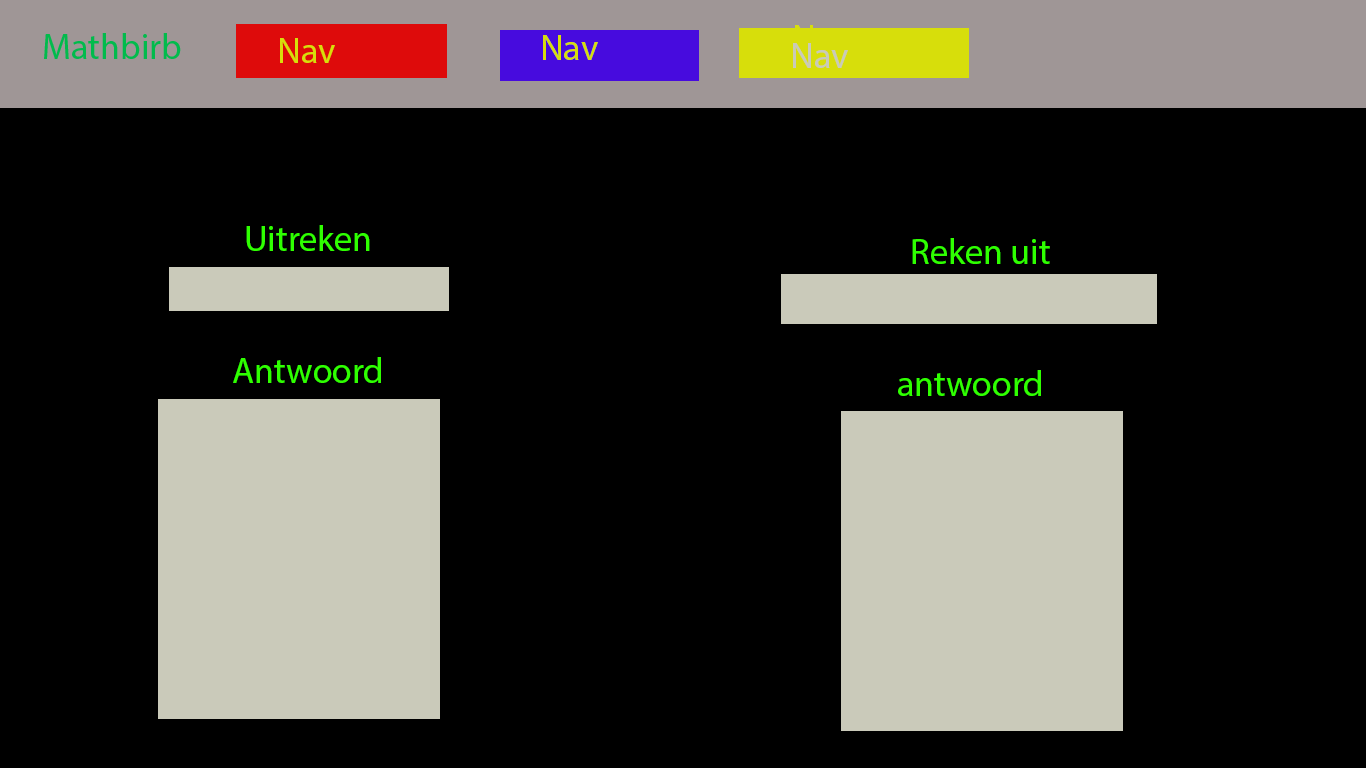
<style>
.page{position:relative;width:1366px;height:768px;background:#000000}
.page>*{position:absolute;margin:0}
.t1{font:36px "MyriadPro-Regular";color:#d7de0b}
.t2{font:36px "MyriadPro-Regular";color:#c9cab9}
.t3{font:36px "MyriadPro-Regular";color:#2fff00}
</style>
<div class="page">
<p class="t1" style="left:280px;top:38px;width:55px;height:25px">Nav</p>
<p class="t1" style="left:543px;top:35px;width:55px;height:25px">Nav</p>
<p class="t2" style="left:793px;top:43px;width:55px;height:25px">Nav</p>
<p class="t3" style="left:246px;top:225px;width:124px;height:26px">Uitreken</p>
<p class="t3" style="left:912px;top:238px;width:138px;height:26px">Reken uit</p>
<p class="t3" style="left:233px;top:357px;width:148px;height:26px">Antwoord</p>
<p class="t3" style="left:898px;top:370px;width:143px;height:26px">antwoord</p>
</div>
